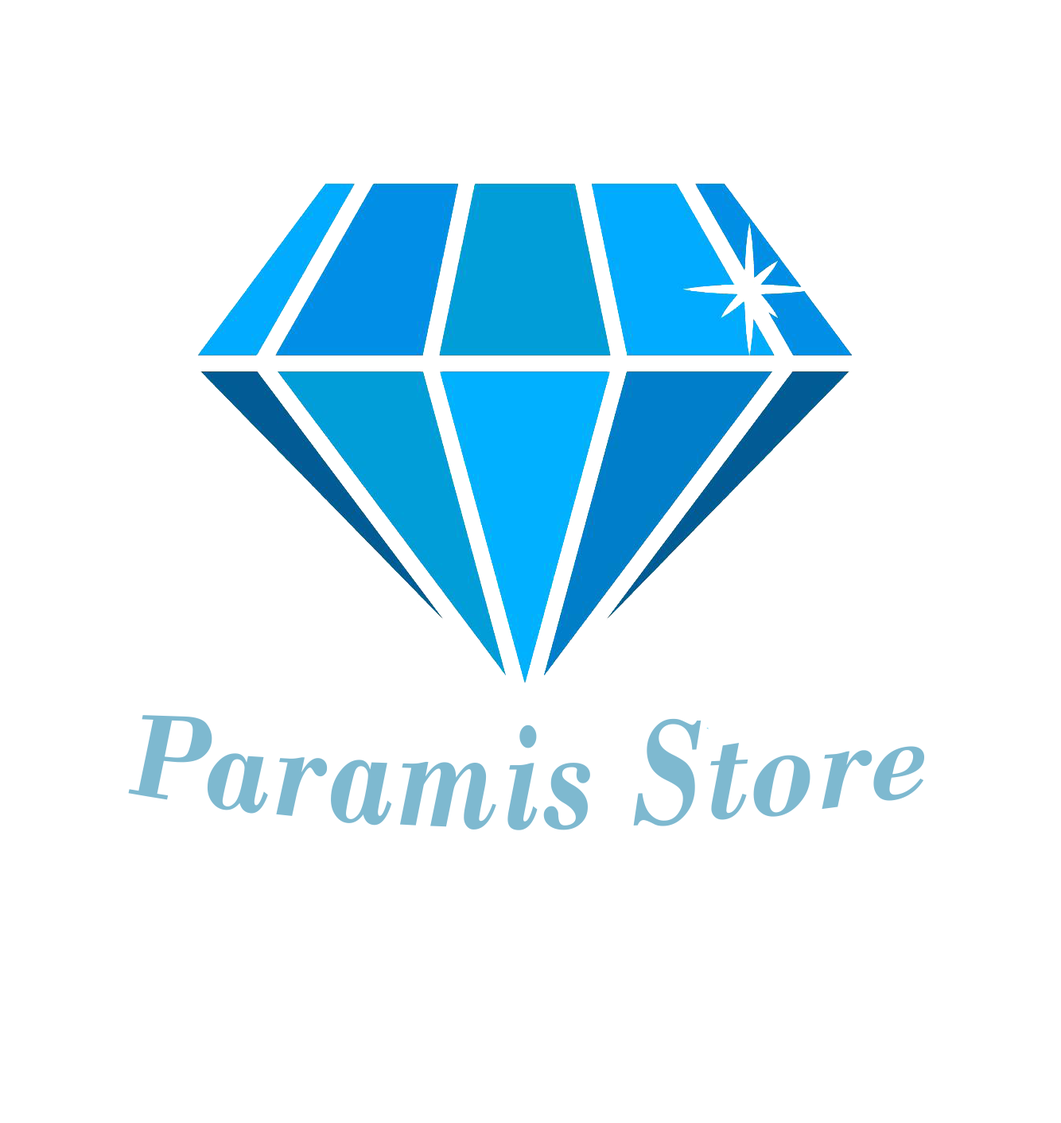
<style>
.page{position:relative;width:1061px;height:1123px;background:#ffffff}
.page>*{position:absolute;margin:0}
.t1{font:119.3px "BodoniMT-BoldItalic";letter-spacing:0.012em;color:#7eb9d0}
</style>
<div class="page">
<p class="t1" style="left:128px;top:715px;width:797px;height:116px">Paramis Store</p>
</div>
